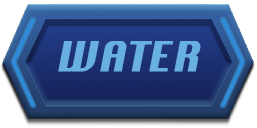
<style>
.page{position:relative;width:257px;height:128px}
.page>*{position:absolute;margin:0}
.t1{font:40.2px "Silom";color:#67b0e1;font-weight:bold;font-style:italic}
</style>
<div class="page">
<p class="t1" style="left:58px;top:41px;width:143px;height:31px">WATER</p>
</div>
